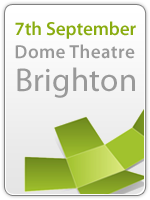
<style>
.page{position:relative;width:150px;height:200px}
.page>*{position:absolute;margin:0}
.t1{font:18.9px "MyriadPro-Semibold";color:#89ac10}
.t2{font:18.9px "MyriadPro-Semibold";letter-spacing:0.025em;color:#999999}
.t3{font:33px/33px "MyriadPro-Regular";letter-spacing:0.01em;color:#999999}
</style>
<div class="page">
<p class="t1" style="left:15px;top:21px;width:121px;height:77px">7th September<br><span class="t2">Dome Theatre<br></span><span class="t3">Brighton</span></p>
</div>
